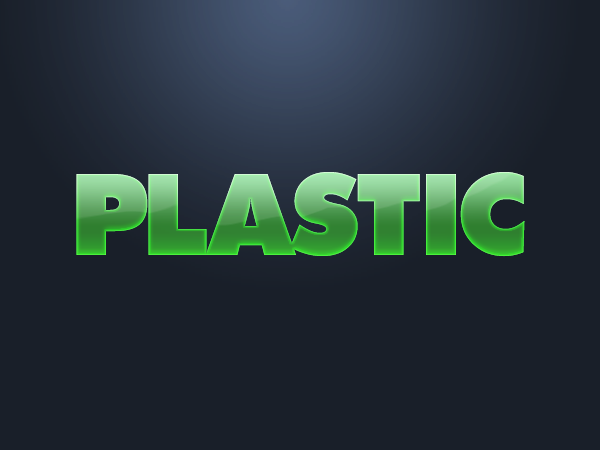
<style>
.page{position:relative;width:600px;height:450px;background:#191f29}
.page>*{position:absolute;margin:0}
.t1{font:113.9px "FuturaBT-ExtraBlack";letter-spacing:-0.03em;text-transform:uppercase}
</style>
<div class="page">
<p class="t1" style="left:76px;top:172px;width:449px;height:85px">PLASTIC</p>
<p class="t1" style="left:76px;top:172px;width:449px;height:85px">PLASTIC</p>
</div>
